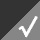
<style>
.page{position:relative;width:40px;height:40px;background:#333333}
.page>*{position:absolute;margin:0}
.t1{font:30px "¿¬Ìå";color:#ffffff;font-weight:bold}
</style>
<div class="page">
<p class="t1" style="left:18px;top:16px;width:20px;height:22px;rotate:11deg">√</p>
</div>
